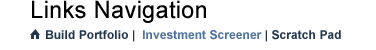
<style>
.page{position:relative;width:376px;height:50px;background:#ffffff}
.page>*{position:absolute;margin:0}
.t1{font:24px "ArialMT";letter-spacing:0.005em;color:#000000}
.t2{font:12px "Arial-BoldMT";letter-spacing:0.005em;color:#4c72a1}
.t3{font:12px "Arial-BoldMT";letter-spacing:0.005em;color:#21354f}
</style>
<div class="page">
<p class="t1" style="left:32px;top:0px;width:174px;height:23px">Links Navigation</p>
<p class="t2" style="left:46px;top:30px;width:295px;height:12px"><span class="t3">Build Portfolio |  </span>Investment Screener <span class="t3">| Scratch Pad</span></p>
</div>
